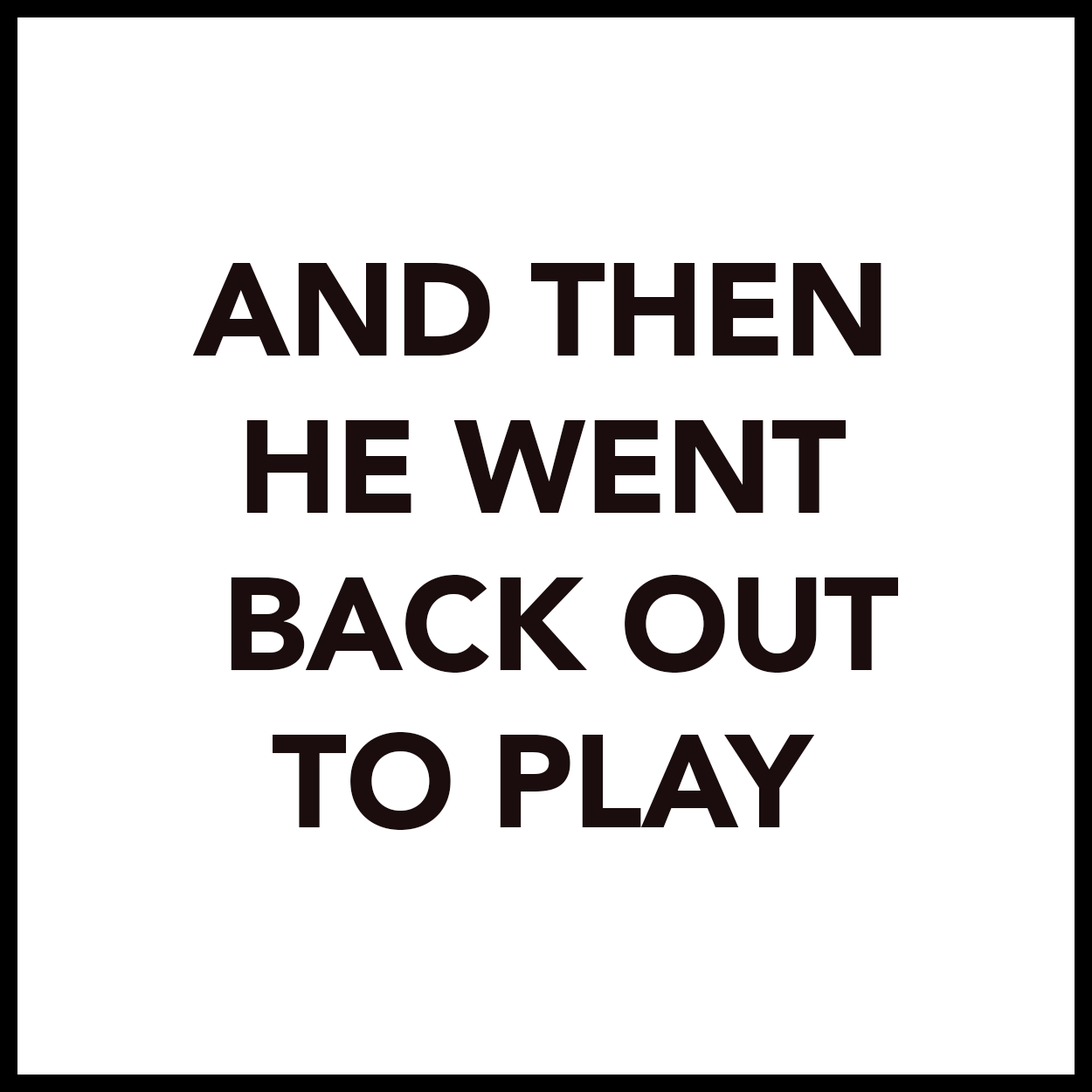
<style>
.page{position:relative;width:1092px;height:1092px;background:#ffffff}
.page>*{position:absolute;margin:0}
.t1{font:131px "Avenir-Black";letter-spacing:-0.01em;color:#1b0d0d}
</style>
<div class="page">
<p class="t1" style="left:192px;top:263px;width:707px;height:567px;text-align:center">AND THEN<br>HE WENT<br> BACK OUT<br>TO PLAY</p>
</div>
